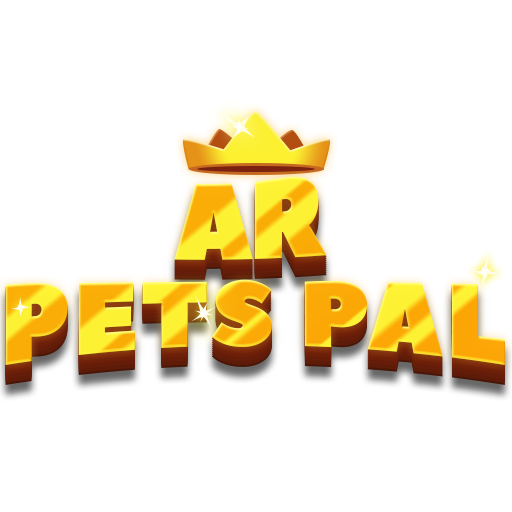
<style>
.page{position:relative;width:512px;height:512px;background:#ffffff}
.page>*{position:absolute;margin:0}
.t1{font:119.8px "PeaceSans";letter-spacing:-0.05em;scale:0.87 1}
.t2{font:115px "PeaceSans";letter-spacing:0.025em;scale:0.87 1}
</style>
<div class="page">
<p class="t1" style="left:174px;top:176px;width:153px;height:84px">AR</p>
<p class="t2" style="left:5px;top:279px;width:500px;height:86px">PETS PAL</p>
</div>
